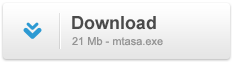
<style>
.page{position:relative;width:234px;height:64px}
.page>*{position:absolute;margin:0}
.t1{font:18px "Arial-BoldMT";color:#4a4a4a}
.t2{font:11px "ArialMT";color:#949494}
</style>
<div class="page">
<p class="t1" style="left:72px;top:16px;width:84px;height:14px">Download</p>
<p class="t2" style="left:72px;top:37px;width:91px;height:9px">21 Mb - mtasa.exe</p>
</div>
